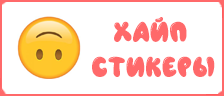
<style>
.page{position:relative;width:224px;height:96px;background:#ffffff}
.page>*{position:absolute;margin:0}
.t1{font:29.1px "Airfool";color:#ff696a}
</style>
<div class="page">
<p class="t1" style="left:92px;top:17px;width:123px;height:60px;text-align:center">Хайп<br> стикеры</p>
</div>
